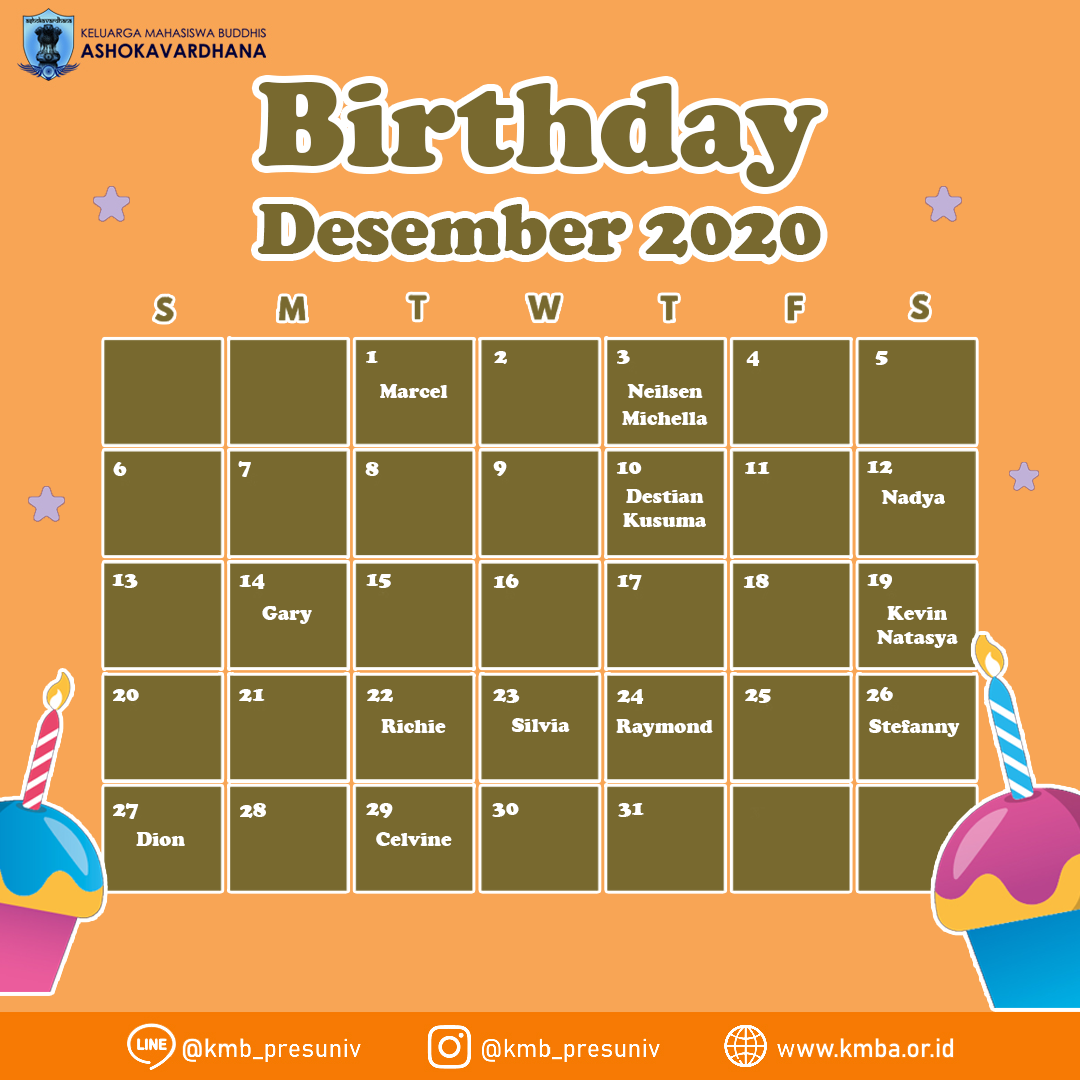
<style>
.page{position:relative;width:1080px;height:1080px;background:#f8a555}
.page>*{position:absolute;margin:0}
.t1{font:74px "CooperBlack";color:#78692f}
.t2{font:123.3px "CooperBlack";color:#78692f}
.t3{font:22px "CooperBlack";color:#ffffff}
.t4{font:20px "CooperBlack";color:#ffffff}
</style>
<div class="page">
<p class="t1" style="left:258px;top:82px;width:564px;height:176px;text-align:center"><span class="t2">Birthday<br></span>Desember 2020</p>
<p class="t3" style="left:366px;top:351px;width:12px;height:12px">1</p>
<p class="t3" style="left:494px;top:351px;width:13px;height:13px">2</p>
<p class="t3" style="left:617px;top:350px;width:13px;height:14px">3</p>
<p class="t3" style="left:746px;top:351px;width:14px;height:15px">4</p>
<p class="t3" style="left:875px;top:351px;width:13px;height:14px">5</p>
<p class="t4" style="left:380px;top:384px;width:68px;height:14px">Marcel</p>
<p class="t4" style="left:627px;top:384px;width:76px;height:14px">Neilsen</p>
<p class="t4" style="left:622px;top:411px;width:86px;height:14px">Michella</p>
<p class="t3" style="left:113px;top:462px;width:14px;height:14px">6</p>
<p class="t3" style="left:238px;top:461px;width:13px;height:16px">7</p>
<p class="t3" style="left:365px;top:462px;width:14px;height:14px">8</p>
<p class="t3" style="left:493px;top:461px;width:14px;height:15px">9</p>
<p class="t3" style="left:616px;top:462px;width:26px;height:12px">10</p>
<p class="t3" style="left:745px;top:462px;width:25px;height:12px">11</p>
<p class="t3" style="left:867px;top:461px;width:26px;height:13px">12</p>
<p class="t4" style="left:623px;top:489px;width:83px;height:38px;text-align:center">Destian<br>Kusuma</p>
<p class="t4" style="left:881px;top:490px;width:64px;height:18px">Nadya</p>
<p class="t3" style="left:112px;top:574px;width:26px;height:14px">13</p>
<p class="t3" style="left:239px;top:574px;width:26px;height:15px">14</p>
<p class="t3" style="left:366px;top:574px;width:25px;height:14px">15</p>
<p class="t3" style="left:493px;top:574px;width:26px;height:14px">16</p>
<p class="t3" style="left:617px;top:574px;width:25px;height:16px">17</p>
<p class="t3" style="left:743px;top:574px;width:26px;height:14px">18</p>
<p class="t3" style="left:867px;top:574px;width:25px;height:15px">19</p>
<p class="t4" style="left:262px;top:606px;width:50px;height:18px">Gary</p>
<p class="t4" style="left:877px;top:606px;width:81px;height:42px;text-align:center">Kevin<br>Natasya</p>
<p class="t3" style="left:113px;top:689px;width:26px;height:13px">20</p>
<p class="t3" style="left:239px;top:689px;width:26px;height:13px">21</p>
<p class="t3" style="left:367px;top:689px;width:26px;height:13px">22</p>
<p class="t3" style="left:493px;top:689px;width:27px;height:14px">23</p>
<p class="t3" style="left:617px;top:689px;width:27px;height:15px">24</p>
<p class="t3" style="left:745px;top:689px;width:26px;height:14px">25</p>
<p class="t3" style="left:866px;top:687px;width:27px;height:15px">26</p>
<p class="t4" style="left:381px;top:719px;width:65px;height:14px">Richie</p>
<p class="t4" style="left:511px;top:718px;width:59px;height:14px">Silvia</p>
<p class="t4" style="left:616px;top:719px;width:97px;height:18px">Raymond</p>
<p class="t4" style="left:869px;top:719px;width:91px;height:18px">Stefanny</p>
<p class="t3" style="left:113px;top:803px;width:26px;height:16px">27</p>
<p class="t3" style="left:240px;top:803px;width:26px;height:15px">28</p>
<p class="t3" style="left:366px;top:803px;width:27px;height:15px">29</p>
<p class="t3" style="left:492px;top:803px;width:27px;height:14px">30</p>
<p class="t3" style="left:618px;top:803px;width:26px;height:14px">31</p>
<p class="t4" style="left:136px;top:832px;width:49px;height:14px">Dion</p>
<p class="t4" style="left:376px;top:832px;width:76px;height:14px">Celvine</p>
</div>
